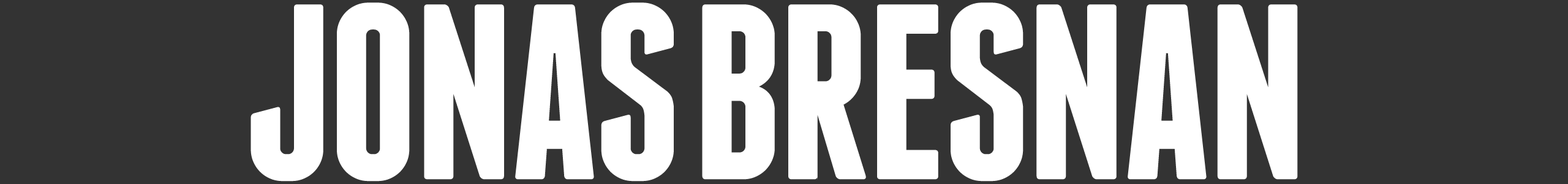
<style>
.page{position:relative;width:1568px;height:184px;background:#333333}
.page>*{position:absolute;margin:0}
.t1{font:249.3px "Franchise-Bold";letter-spacing:-0.02em;color:#ffffff}
</style>
<div class="page">
<p class="t1" style="left:251px;top:2px;width:1047px;height:179px">JONASBRESNAN</p>
</div>
